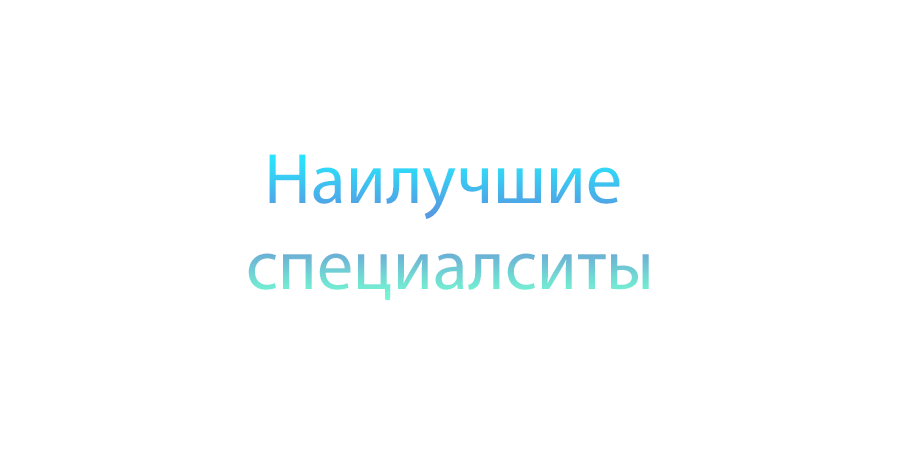
<style>
.page{position:relative;width:900px;height:450px;background:#ffffff}
.page>*{position:absolute;margin:0}
.t1{font:72px "MyriadPro-Regular"}
</style>
<div class="page">
<p class="t1" style="left:248px;top:154px;width:401px;height:146px;text-align:center">Наилучшие <br>специалситы</p>
</div>
